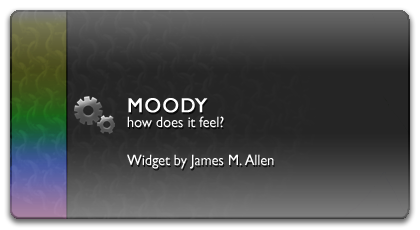
<style>
.page{position:relative;width:420px;height:230px}
.page>*{position:absolute;margin:0}
.t1{font:20px "GillSansMT";letter-spacing:0.05em;color:#ffffff;font-weight:bold}
.t2{font:15px "GillSansMT";color:#ffffff;scale:0.95 1}
</style>
<div class="page">
<p class="t1" style="left:128px;top:98px;width:80px;height:15px">MOODY</p>
<p class="t2" style="left:127px;top:116px;width:97px;height:12px">how does it feel?</p>
<p class="t2" style="left:127px;top:154px;width:147px;height:15px">Widget by James M. Allen</p>
</div>
